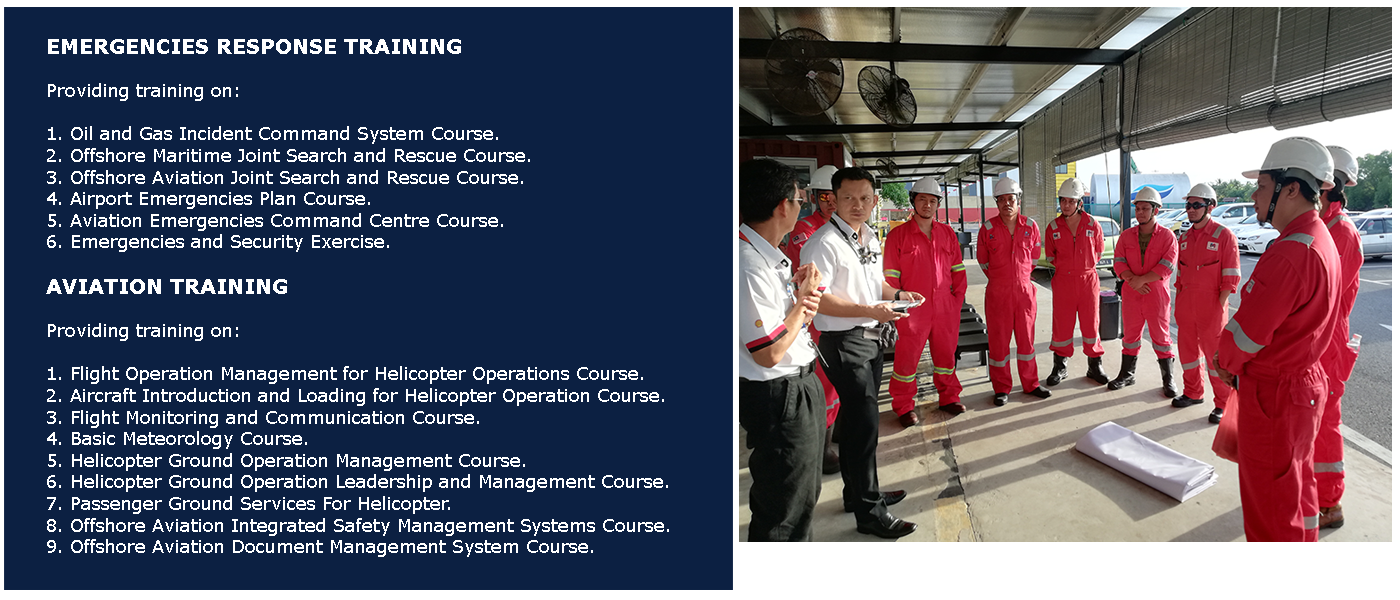
<style>
.page{position:relative;width:1400px;height:600px;background:#0c2042}
.page>*{position:absolute;margin:0}
.t1{font:18px "Verdana";color:#ffffff}
.t2{font:20px "Verdana-Bold";color:#ffffff}
</style>
<div class="page">
<p class="t1" style="left:46px;top:39px;width:623px;height:518px"><span class="t2">EMERGENCIES RESPONSE TRAINING<br></span><br>Providing training on:<br><br>1. Oil and Gas Incident Command System Course.<br>2. Offshore Maritime Joint Search and Rescue Course.<br>3. Offshore Aviation Joint Search and Rescue Course.<br>4. Airport Emergencies Plan Course.<br>5. Aviation Emergencies Command Centre Course.<br>6. Emergencies and Security Exercise.<br><br><span class="t2">AVIATION TRAINING<br></span><br>Providing training on:<br><br>1. Flight Operation Management for Helicopter Operations Course.<br>2. Aircraft Introduction and Loading for Helicopter Operation Course.<br>3. Flight Monitoring and Communication Course.<br>4. Basic Meteorology Course.<br>5. Helicopter Ground Operation Management Course.<br>6. Helicopter Ground Operation Leadership and Management Course.<br>7. Passenger Ground Services For Helicopter.<br>8. Offshore Aviation Integrated Safety Management Systems Course.<br>9. Offshore Aviation Document Management System Course.</p>
</div>
